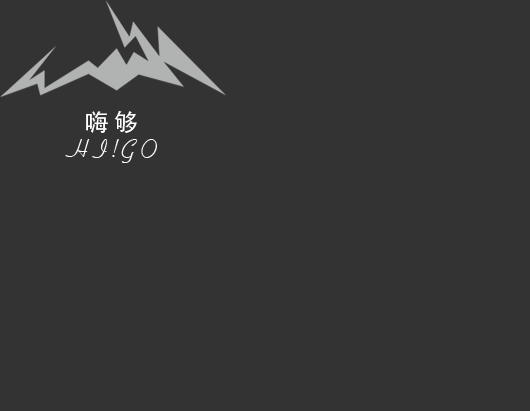
<style>
.page{position:relative;width:530px;height:411px;background:#333333}
.page>*{position:absolute;margin:0}
.t1{font:24px "AdobeHeitiStd-Regular";color:#ffffff;text-transform:uppercase}
.t2{font:24px "Coronet";color:#ffffff;text-transform:uppercase}
</style>
<div class="page">
<p class="t1" style="left:86px;top:110px;width:51px;height:24px">嗨 够</p>
<p class="t2" style="left:65px;top:139px;width:92px;height:24px">h i ! g o</p>
</div>
